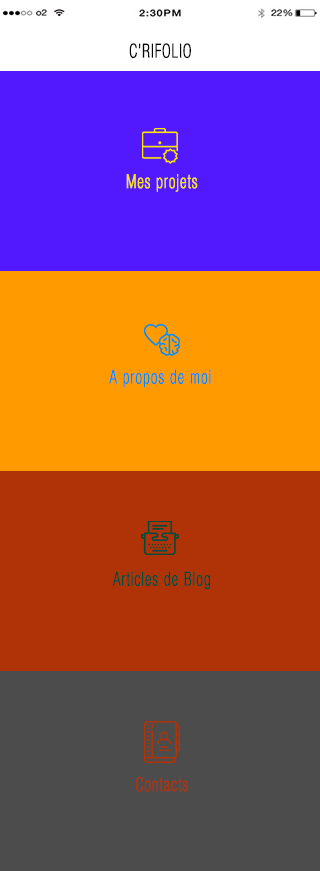
<style>
.page{position:relative;width:320px;height:871px;background:#ff9b00}
.page>*{position:absolute;margin:0}
.t1{font:19.1px "HelveticaNeueLTStd-ThCn";letter-spacing:0.06em;color:#040404;font-weight:bold;scale:0.79 1}
.t2{font:19.1px "HelveticaNeueLTStd-ThCn";letter-spacing:0.06em;color:#ffe800;font-weight:bold;scale:0.79 1}
.t3{font:19.1px "HelveticaNeueLTStd-ThCn";letter-spacing:0.06em;color:#008cff;font-weight:bold;scale:0.79 1}
.t4{font:19.1px "HelveticaNeueLTStd-ThCn";letter-spacing:0.06em;color:#014c3d;font-weight:bold;scale:0.79 1}
.t5{font:19.1px "HelveticaNeueLTStd-ThCn";letter-spacing:0.06em;color:#af3307;font-weight:bold;scale:0.79 1}
</style>
<div class="page">
<p class="t1" style="left:129px;top:43px;width:62px;height:15px">C’RIFOLIO</p>
<p class="t2" style="left:126px;top:174px;width:72px;height:18px">Mes projets</p>
<p class="t3" style="left:109px;top:369px;width:102px;height:19px">A propos de moi</p>
<p class="t4" style="left:112px;top:571px;width:98px;height:19px">Articles de Blog</p>
<p class="t5" style="left:136px;top:776px;width:52px;height:16px">Contacts</p>
</div>
